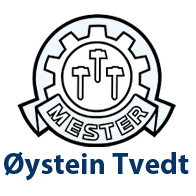
<style>
.page{position:relative;width:196px;height:196px;background:#ffffff}
.page>*{position:absolute;margin:0}
.t1{font:30px "MyriadPro-Bold";color:#063565}
</style>
<div class="page">
<p class="t1" style="left:4px;top:151px;width:185px;height:30px">Øystein Tvedt</p>
</div>
